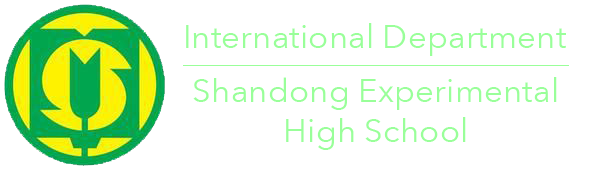
<style>
.page{position:relative;width:600px;height:170px;background:#ffffff}
.page>*{position:absolute;margin:0}
.t1{font:33.3px "AvenirNext-Regular";color:#99ff99}
</style>
<div class="page">
<p class="t1" style="left:186px;top:23px;width:380px;height:33px">International Department</p>
<p class="t1" style="left:193px;top:77px;width:364px;height:73px;text-align:center">Shandong Experimental High School</p>
</div>
